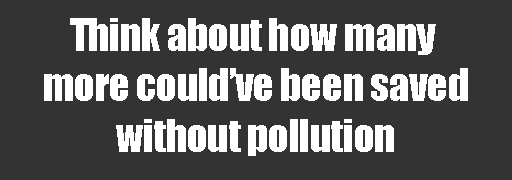
<style>
.page{position:relative;width:512px;height:180px;background:#333333}
.page>*{position:absolute;margin:0}
.t1{font:42px "Impact";letter-spacing:-0.02em;color:#ffffff}
</style>
<div class="page">
<p class="t1" style="left:44px;top:18px;width:424px;height:138px;text-align:center">Think about how many <br>more could’ve been saved<br>without pollution</p>
</div>
